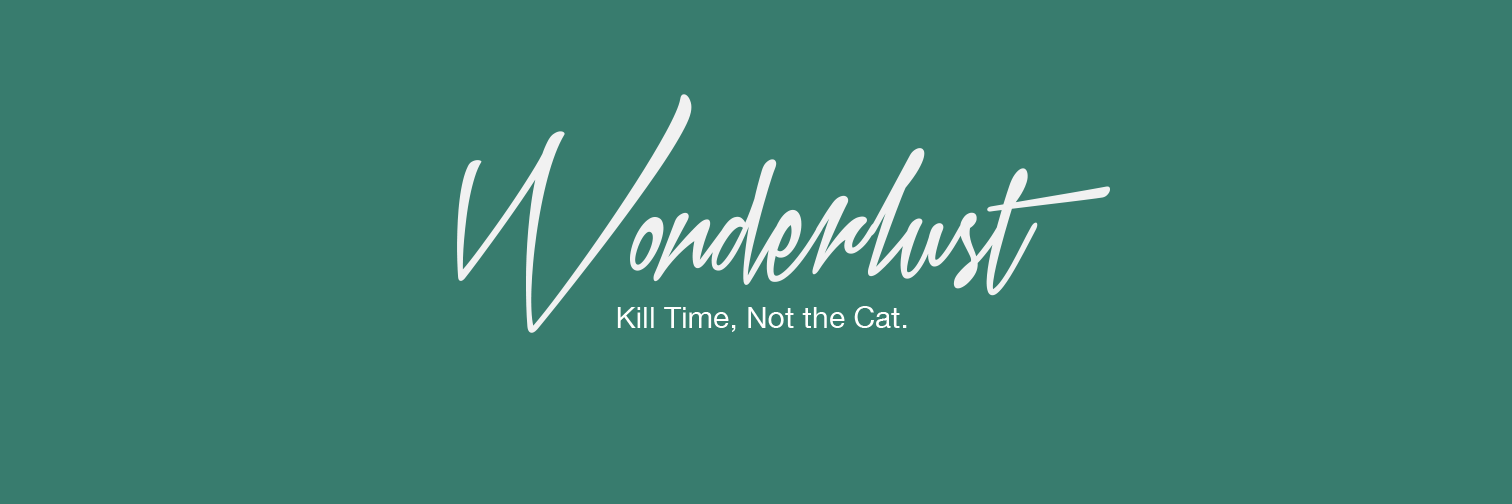
<style>
.page{position:relative;width:1512px;height:504px;background:#387c6e}
.page>*{position:absolute;margin:0}
.t1{font:200px "Xtreem2PersonalUse";color:#f1f1f1}
.t2{font:30px "HelveticaNeue";color:#fffffe}
</style>
<div class="page">
<p class="t1" style="left:457px;top:94px;width:653px;height:239px">Wonderlust</p>
<p class="t2" style="left:617px;top:306px;width:290px;height:26px">Kill Time, Not the Cat.</p>
</div>
